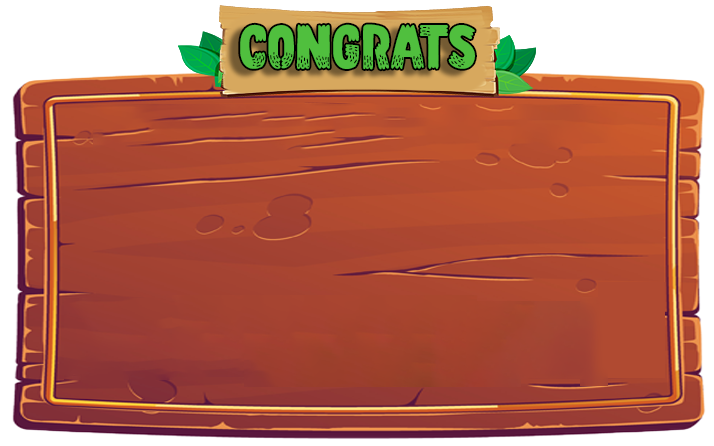
<style>
.page{position:relative;width:714px;height:446px}
.page>*{position:absolute;margin:0}
.t1{font:63.3px "CartooNatureRegular";color:#50bf3e;scale:0.9 1}
</style>
<div class="page">
<p class="t1" style="left:240px;top:24px;width:235px;height:46px">CONGRATS</p>
</div>
